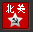
<style>
.page{position:relative;width:33px;height:32px;background:#c50000}
.page>*{position:absolute;margin:0}
.t1{font:10.4px "SimSun";color:#ffffff}
</style>
<div class="page">
<p class="t1" style="left:6px;top:4px;width:19px;height:9px">北美</p>
</div>
